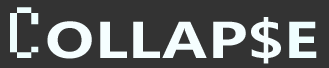
<style>
.page{position:relative;width:329px;height:68px;background:#333333}
.page>*{position:absolute;margin:0}
.t1{font:48px "MicrosoftYaHei-Bold";color:#f5feff;scale:1.26 1}
.t2{font:72px "Terminal";color:#efffff;scale:1.26 1}
.t3{font:48px "MicrosoftYaHei-Bold";color:#effeff;scale:1.26 1}
</style>
<div class="page">
<p class="t1" style="left:10px;top:7px;width:307px;height:57px"><span class="t2">C</span>OLLAP$<span class="t3">E</span></p>
</div>
